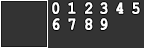
<style>
.page{position:relative;width:144px;height:48px;background:#333333}
.page>*{position:absolute;margin:0}
.t1{font:18px "CourierNewPS-BoldMT";color:#ffffff;font-weight:bold;scale:0.8 1}
</style>
<div class="page">
<p class="t1" style="left:52px;top:2px;width:8px;height:12px">0</p>
<p class="t1" style="left:68px;top:2px;width:8px;height:12px">1</p>
<p class="t1" style="left:85px;top:2px;width:8px;height:12px">2</p>
<p class="t1" style="left:100px;top:2px;width:8px;height:12px">3</p>
<p class="t1" style="left:116px;top:2px;width:8px;height:12px">4</p>
<p class="t1" style="left:132px;top:2px;width:8px;height:12px">5</p>
<p class="t1" style="left:52px;top:18px;width:8px;height:12px">6</p>
<p class="t1" style="left:68px;top:18px;width:8px;height:12px">7</p>
<p class="t1" style="left:85px;top:18px;width:8px;height:12px">8</p>
<p class="t1" style="left:100px;top:18px;width:8px;height:12px">9</p>
</div>
